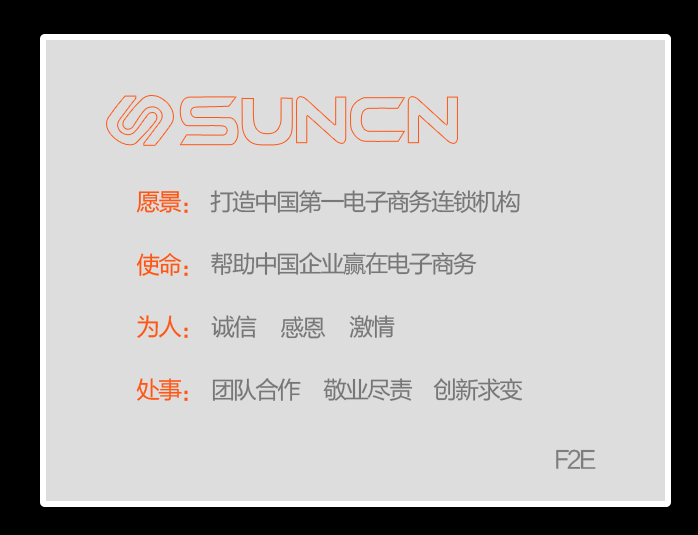
<style>
.page{position:relative;width:698px;height:535px;background:#dddddd}
.page>*{position:absolute;margin:0}
.t1{font:24px "FZLTHK--GBK1-0";letter-spacing:-0.08em;color:#ff5615;text-transform:uppercase}
.t2{font:24px "FZLTHK--GBK1-0";letter-spacing:-0.08em;color:#777777;text-transform:uppercase}
.t3{font:24px "FZLTHK--GBK1-0";letter-spacing:-0.08em;color:#7e7e7e;text-transform:uppercase}
</style>
<div class="page">
<p class="t1" style="left:136px;top:191px;width:52px;height:22px">愿景：</p>
<p class="t2" style="left:210px;top:190px;width:310px;height:23px">打造中国第一电子商务连锁机构</p>
<p class="t1" style="left:136px;top:253px;width:52px;height:23px">使命：</p>
<p class="t2" style="left:211px;top:252px;width:266px;height:24px">帮助中国企业赢在电子商务</p>
<p class="t1" style="left:137px;top:315px;width:51px;height:23px">为人：</p>
<p class="t2" style="left:211px;top:315px;width:46px;height:23px">诚信</p>
<p class="t2" style="left:281px;top:316px;width:45px;height:23px">感恩</p>
<p class="t2" style="left:349px;top:315px;width:46px;height:23px">激情</p>
<p class="t1" style="left:136px;top:378px;width:52px;height:23px">处事：</p>
<p class="t2" style="left:212px;top:378px;width:89px;height:23px">团队合作</p>
<p class="t2" style="left:323px;top:378px;width:90px;height:23px">敬业尽责</p>
<p class="t2" style="left:433px;top:378px;width:89px;height:23px">创新求变</p>
<p class="t3" style="left:556px;top:449px;width:13px;height:20px">F</p>
<p class="t3" style="left:567px;top:449px;width:14px;height:20px">2</p>
<p class="t3" style="left:580px;top:449px;width:16px;height:20px">E</p>
</div>
